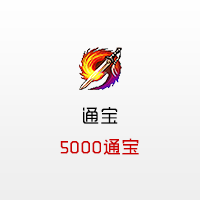
<style>
.page{position:relative;width:200px;height:200px}
.page>*{position:absolute;margin:0}
.t1{font:18px "MFShangHei_Noncommercial-Regular";letter-spacing:0.04em;color:#cc0000}
.t2{font:18px "MFYueHei_Noncommercial-Regular";letter-spacing:0.04em;color:#000000}
</style>
<div class="page">
<p class="t1" style="left:60px;top:107px;width:79px;height:48px;text-align:center"><span class="t2">通宝<br></span>5000通宝</p>
</div>
